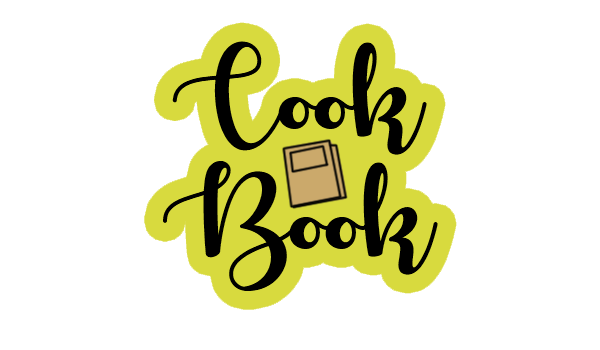
<style>
.page{position:relative;width:600px;height:350px;background:#ffffff}
.page>*{position:absolute;margin:0}
.t1{font:100px "AutumninNovember";color:#000000}
</style>
<div class="page">
<p class="t1" style="left:163px;top:41px;width:275px;height:250px;text-align:center">Cook<br>Book</p>
</div>
